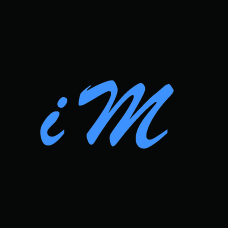
<style>
.page{position:relative;width:228px;height:228px;background:#060808}
.page>*{position:absolute;margin:0}
.t1{font:100px "BrushScriptMT";letter-spacing:0.2em;color:#3e92ff}
</style>
<div class="page">
<p class="t1" style="left:40px;top:80px;width:134px;height:69px">iM</p>
</div>
